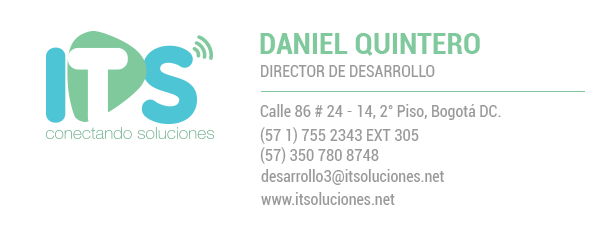
<style>
.page{position:relative;width:608px;height:232px;background:#ffffff}
.page>*{position:absolute;margin:0}
.t1{font:30px "Roboto-BoldCondensed";color:#7fc99d}
.t2{font:16px "Roboto-Condensed";color:#999999}
</style>
<div class="page">
<p class="t1" style="left:260px;top:33px;width:220px;height:23px">DANIEL QUINTERO</p>
<p class="t2" style="left:261px;top:65px;width:174px;height:12px">DIRECTOR DE DESARROLLO</p>
<p class="t2" style="left:260px;top:104px;width:241px;height:16px">Calle 86 # 24 - 14, 2° Piso, Bogotá DC.</p>
<p class="t2" style="left:260px;top:127px;width:159px;height:17px">(57 1) 755 2343 EXT 305</p>
<p class="t2" style="left:260px;top:147px;width:119px;height:17px">(57) 350 780 8748</p>
<p class="t2" style="left:261px;top:169px;width:183px;height:16px">desarrollo3@itsoluciones.net</p>
<p class="t2" style="left:261px;top:192px;width:134px;height:13px">www.itsoluciones.net</p>
</div>
